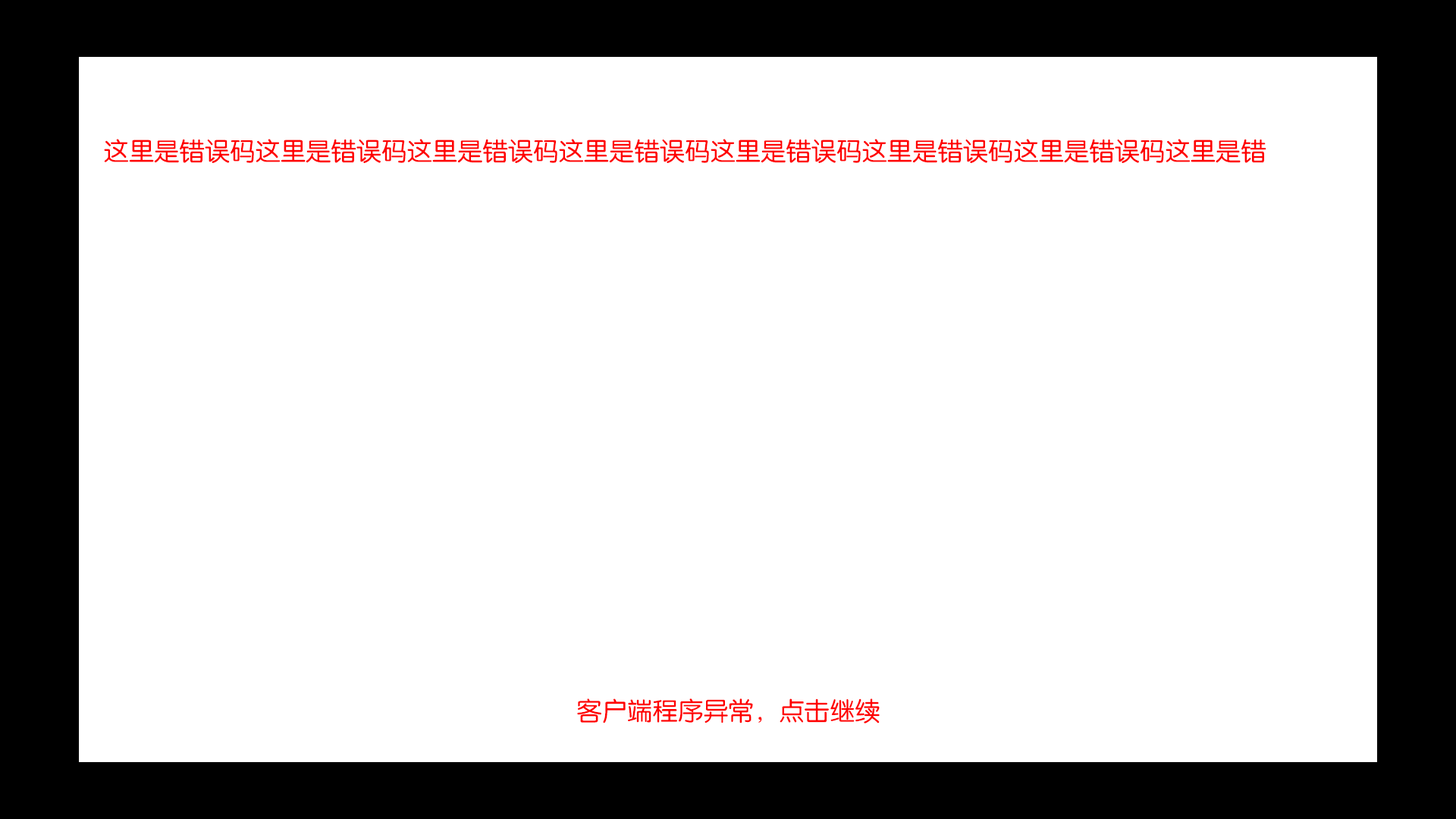
<style>
.page{position:relative;width:1456px;height:819px;background:#ffffff}
.page>*{position:absolute;margin:0}
.t1{font:25.3px "FZY3K--GBK1-0";color:#ff0000}
</style>
<div class="page">
<p class="t1" style="left:104px;top:139px;width:1162px;height:24px">这里是错误码这里是错误码这里是错误码这里是错误码这里是错误码这里是错误码这里是错误码这里是错</p>
<p class="t1" style="left:577px;top:698px;width:303px;height:25px">客户端程序异常，点击继续</p>
</div>
